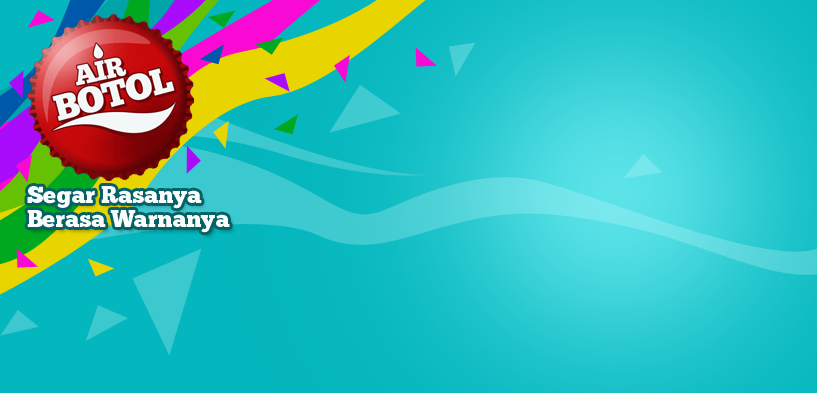
<style>
.page{position:relative;width:817px;height:393px}
.page>*{position:absolute;margin:0}
.t1{font:23.7px "ChunkFive";letter-spacing:-0.005em;color:#fbfdfd}
</style>
<div class="page">
<p class="t1" style="left:27px;top:186px;width:175px;height:23px">Segar Rasanya</p>
<p class="t1" style="left:27px;top:210px;width:203px;height:23px">Berasa Warnanya</p>
</div>
